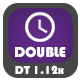
<style>
.page{position:relative;width:80px;height:80px;background:#464646}
.page>*{position:absolute;margin:0}
.t1{font:15px "Bauhaus93";color:#ffffff}
.t2{font:12px "Bauhaus93";color:#ffffff}
</style>
<div class="page">
<p class="t1" style="left:15px;top:46px;width:51px;height:12px">DOUBLE</p>
<p class="t2" style="left:15px;top:65px;width:49px;height:9px">DT 1.12x</p>
</div>
